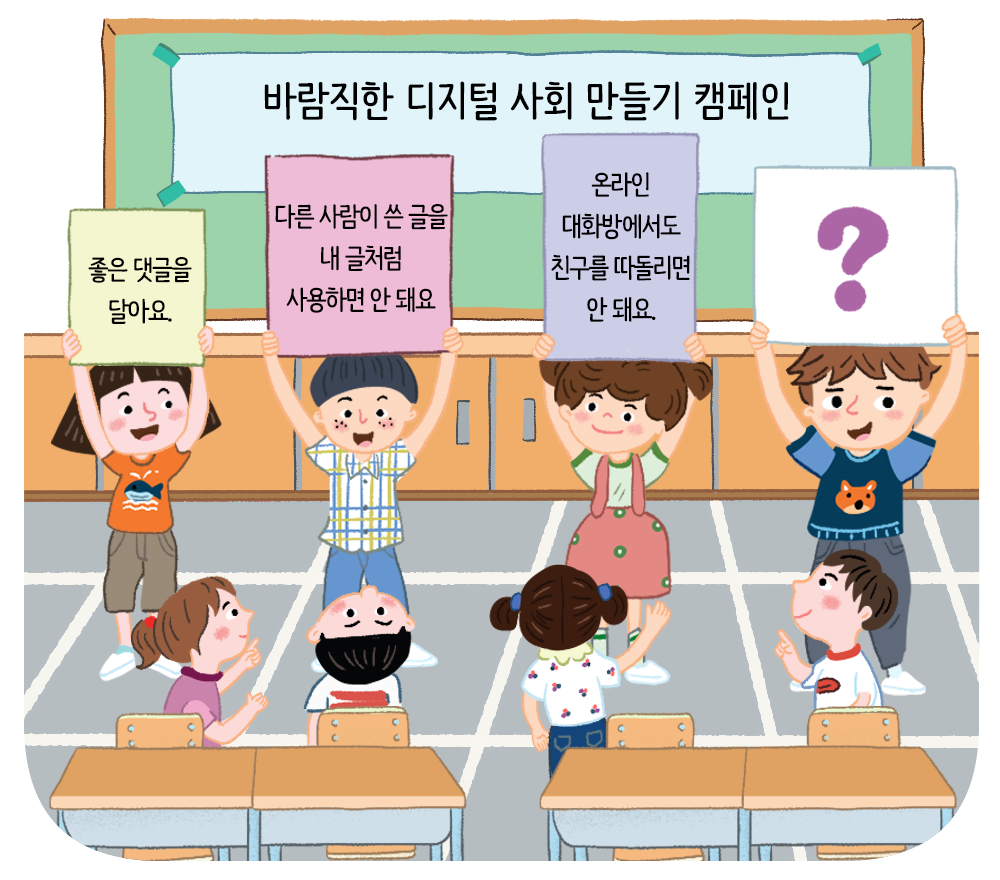
<style>
.page{position:relative;width:1000px;height:880px}
.page>*{position:absolute;margin:0}
.t1{font:41.7px "NanumBarunpen-Bold";color:#000000}
.t2{font:27.1px/41.7px "NanumBarunpen-Bold";letter-spacing:-0.06em;color:#000000}
</style>
<div class="page">
<p class="t1" style="left:264px;top:81px;width:525px;height:40px">바람직한 디지털 사회 만들기 캠페인</p>
<p class="t2" style="left:551px;top:172px;width:139px;height:150px;text-align:center">온라인<br>대화방에서도<br>친구를 따돌리면<br>안 돼요.</p>
<p class="t2" style="left:275px;top:204px;width:173px;height:109px;text-align:center">다른 사람이 쓴 글을<br>내 글처럼<br>사용하면 안 돼요</p>
<p class="t2" style="left:88px;top:257px;width:104px;height:67px;text-align:center">좋은 댓글을<br>달아요.</p>
</div>
